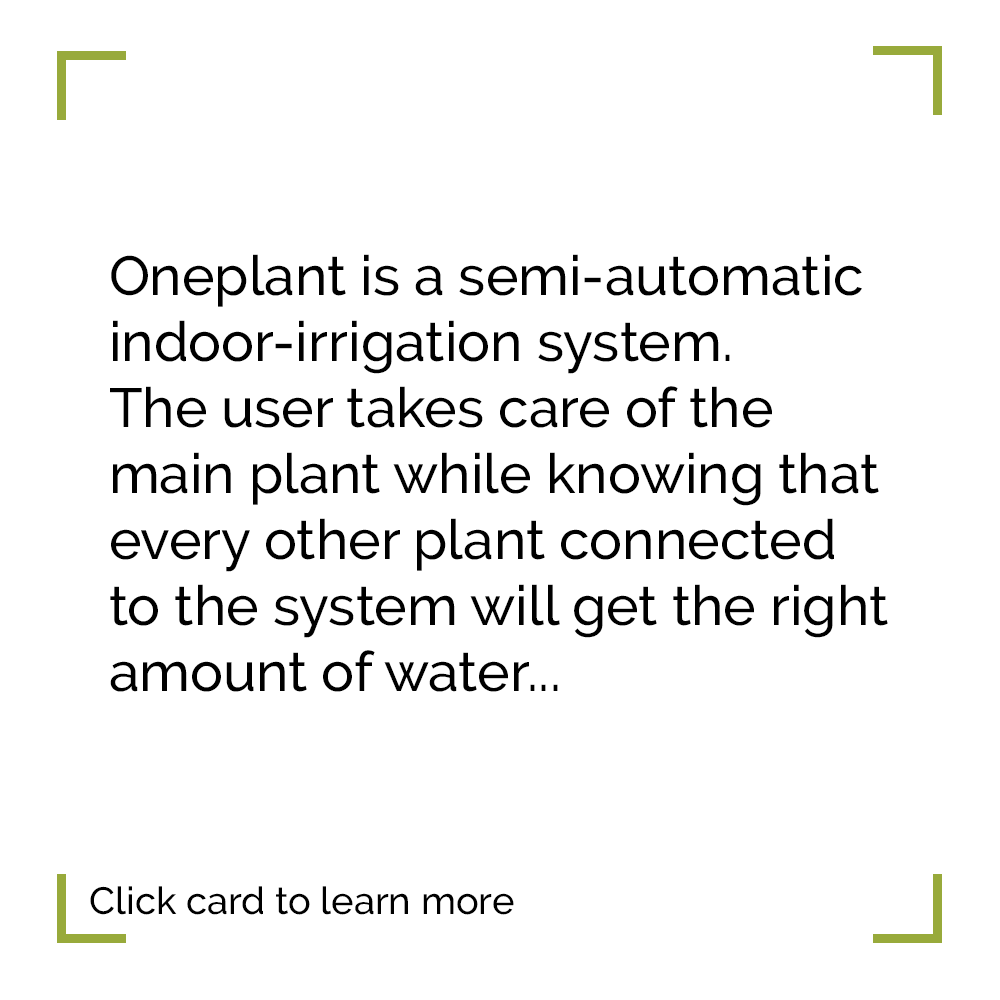
<style>
.page{position:relative;width:1000px;height:1000px;background:#ffffff}
.page>*{position:absolute;margin:0}
.t1{font:55px "Raleway-Medium";color:#000000}
.t2{font:38px "Raleway-Medium";color:#000000}
</style>
<div class="page">
<p class="t1" style="left:110px;top:254px;width:778px;height:438px">Oneplant is a semi-automatic<br>indoor-irrigation system.<br>The user takes care of the<br>main plant while knowing that <br>every other plant connected <br>to the system will get the right <br>amount of water...</p>
<p class="t2" style="left:90px;top:886px;width:424px;height:29px">Click card to learn more</p>
</div>
